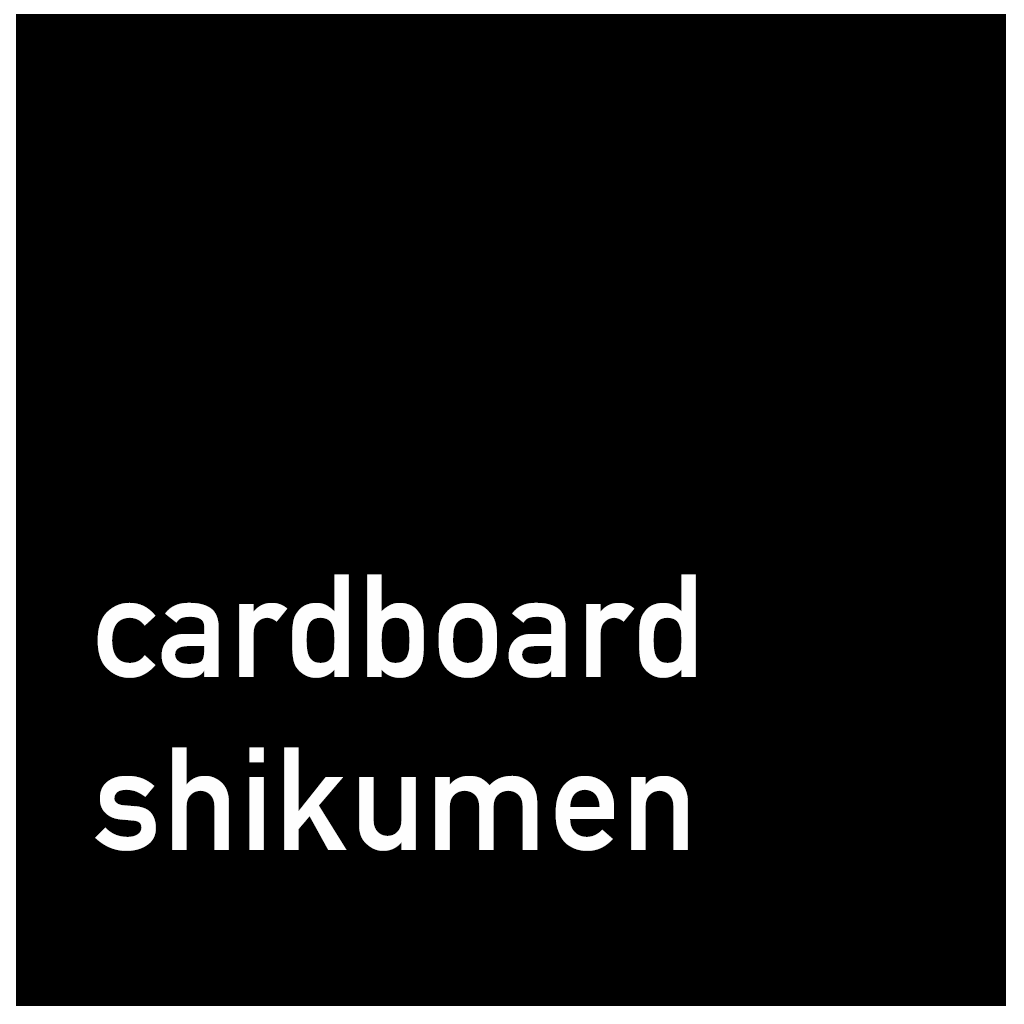
<style>
.page{position:relative;width:1024px;height:1024px;background:#000000}
.page>*{position:absolute;margin:0}
.t1{font:144px "DINAlternate-Bold";color:#fefefe}
.t2{font:72px "DINAlternate-Bold";color:#fefefe}
</style>
<div class="page">
<p class="t1" style="left:95px;top:574px;width:601px;height:277px"><span class="t2"><br><br><br><br><br><br></span>cardboard<br>shikumen</p>
</div>
